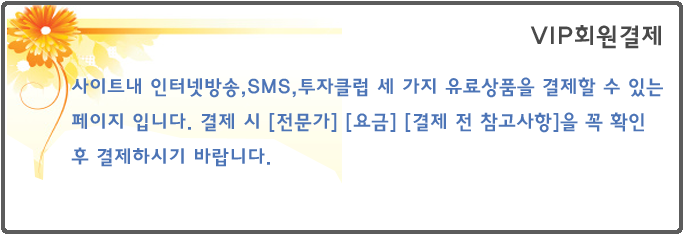
<style>
.page{position:relative;width:685px;height:235px;background:#ffffff}
.page>*{position:absolute;margin:0}
.t1{font:25px "HaanYGodic24";color:#494949}
.t2{font:20px "HaanYGodic24";color:#4c74b6}
</style>
<div class="page">
<p class="t1" style="left:530px;top:25px;width:131px;height:24px">VIP회원결제</p>
<p class="t2" style="left:71px;top:77px;width:592px;height:90px">사이트내 인터넷방송,SMS,투자클럽 세 가지 유료상품을 결제할 수 있는 페이지 입니다. 결제 시 [전문가] [요금] [결제 전 참고사항]을 꼭 확인 후 결제하시기 바랍니다.</p>
</div>
